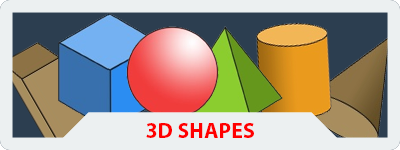
<style>
.page{position:relative;width:400px;height:150px;background:#ecf0f1}
.page>*{position:absolute;margin:0}
.t1{font:21.9px "MyriadPro-Bold";color:#ff0000}
</style>
<div class="page">
<p class="t1" style="left:146px;top:123px;width:108px;height:15px">3D SHAPES</p>
</div>
